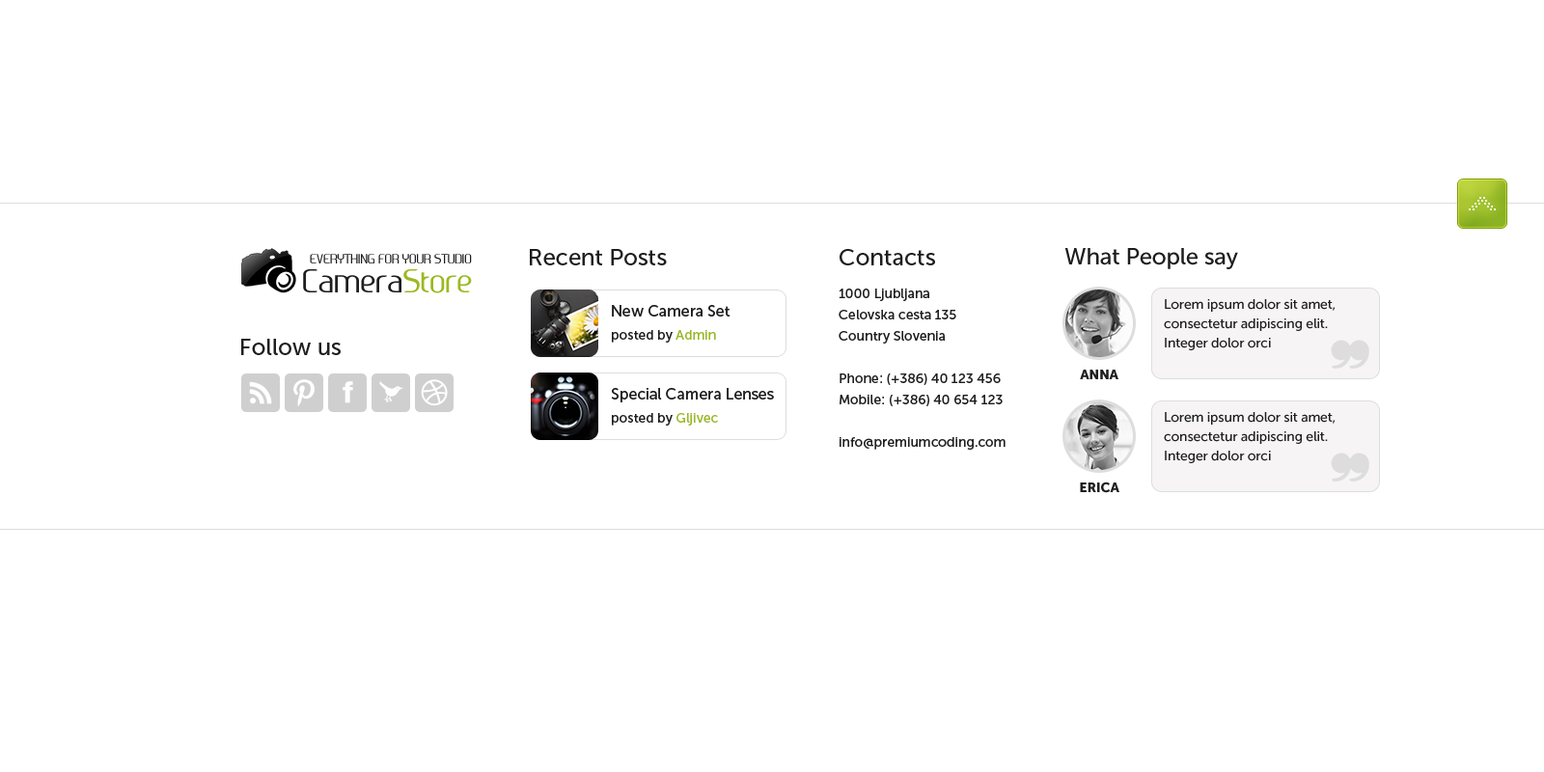
<style>
.page{position:relative;width:1544px;height:772px;background:#ffffff}
.page>*{position:absolute;margin:0}
.t1{font:12.5px "Ageone";color:#1e1e20}
.t2{font:23.2px "MuseoSans-500";color:#1e1e20}
.t3{font:23.2px "MuseoSans-500";letter-spacing:-0.01em;color:#1e1e20}
.t4{font:30.9px "Ageone";color:#1e1e20}
.t5{font:30.9px "Ageone";color:#9ab920}
.t6{font:13.5px/21.2px "MuseoSans-500";color:#1e1e20}
.t7{font:15.4px "MuseoSans-500";color:#1e1e20}
.t8{font:13.5px/19.3px "MuseoSans-500";letter-spacing:-0.01em;color:#1e1e20}
.t9{font:13.5px "MuseoSans-500";color:#1e1e20}
.t10{font:13.5px "MuseoSans-500";color:#98b827}
.t11{font:13.5px "MuseoSans-900";letter-spacing:-0.01em;color:#1e1e20}
</style>
<div class="page">
<p class="t1" style="left:310px;top:254px;width:162px;height:9px">EVERYTHING FOR YOUR STUDIO</p>
<p class="t2" style="left:530px;top:249px;width:137px;height:16px">Recent Posts</p>
<p class="t2" style="left:840px;top:249px;width:95px;height:16px">Contacts</p>
<p class="t3" style="left:1065px;top:248px;width:173px;height:21px">What People say</p>
<p class="t4" style="left:303px;top:269px;width:169px;height:24px">Camera<span class="t5">Store</span></p>
<p class="t6" style="left:839px;top:289px;width:167px;height:161px">1000 Ljubljana<br>Celovska cesta 135<br>Country Slovenia<br><br>Phone: (+386) 40 123 456<br>Mobile: (+386) 40 654 123<br><br>info@premiumcoding.com</p>
<p class="t7" style="left:612px;top:305px;width:119px;height:12px">New Camera Set</p>
<p class="t8" style="left:1164px;top:299px;width:172px;height:51px">Lorem ipsum dolor sit amet, <br>consectetur adipiscing elit. <br>Integer dolor orci</p>
<p class="t2" style="left:241px;top:339px;width:100px;height:16px">Follow us</p>
<p class="t9" style="left:612px;top:330px;width:104px;height:13px">posted by<span class="t10"> Admin</span></p>
<p class="t11" style="left:1080px;top:370px;width:39px;height:9px">ANNA</p>
<p class="t7" style="left:611px;top:388px;width:163px;height:14px">Special Camera Lenses</p>
<p class="t9" style="left:612px;top:413px;width:106px;height:13px">posted by<span class="t10"> Gljivec</span></p>
<p class="t8" style="left:1164px;top:412px;width:172px;height:51px">Lorem ipsum dolor sit amet, <br>consectetur adipiscing elit. <br>Integer dolor orci</p>
<p class="t11" style="left:1080px;top:482px;width:40px;height:11px">ERICA</p>
</div>
